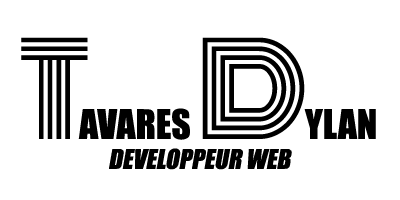
<style>
.page{position:relative;width:400px;height:200px;background:#ffffff}
.page>*{position:absolute;margin:0}
.t1{font:37.5px "Impact";color:#000000;text-transform:uppercase}
.t2{font:125px "Monoton-Regular";letter-spacing:-0.1em;color:#000000;text-transform:uppercase}
.t3{font:125px "Monoton-Regular";letter-spacing:-0.025em;color:#000000;text-transform:uppercase}
.t4{font:25px "Impact";color:#000000;text-transform:uppercase;font-style:italic}
</style>
<div class="page">
<p class="t1" style="left:21px;top:37px;width:355px;height:103px"><span class="t2">T</span>avares <span class="t3">D</span>ylan</p>
<p class="t4" style="left:109px;top:148px;width:183px;height:22px">Developpeur Web</p>
</div>
